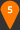
<style>
.page{position:relative;width:20px;height:30px;background:#ff7800}
.page>*{position:absolute;margin:0}
.t1{font:9px "OpenSans";color:#ffffff;font-weight:bold}
</style>
<div class="page">
<p class="t1" style="left:7px;top:6px;width:6px;height:8px">5</p>
</div>
